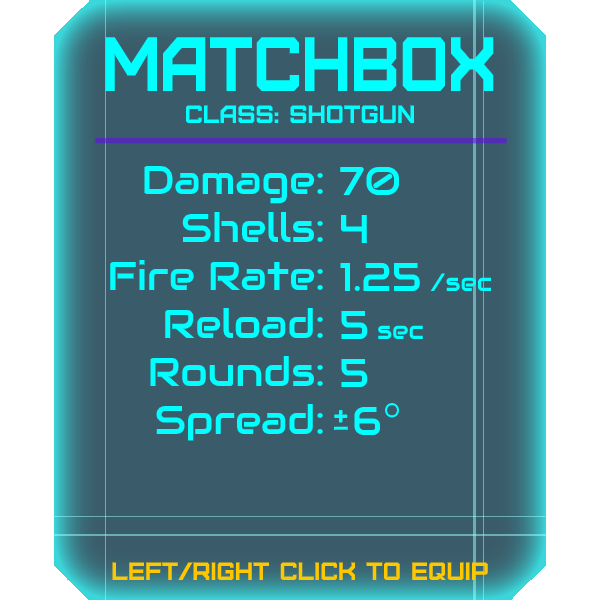
<style>
.page{position:relative;width:600px;height:600px;background:#3a5c6a}
.page>*{position:absolute;margin:0}
.t1{font:76.8px "Furore";color:#00ffff;scale:0.87 1}
.t2{font:25px "Furore";color:#00ffff}
.t3{font:40px "Audiowide-Regular";color:#00ffff}
.t4{font:25px "Audiowide-Regular";color:#00ffff}
.t5{font:25px "Furore";color:#ffc700}
</style>
<div class="page">
<p class="t1" style="left:105px;top:37px;width:389px;height:54px">matchbox</p>
<p class="t2" style="left:186px;top:105px;width:228px;height:18px">Class: Shotgun</p>
<p class="t3" style="left:110px;top:165px;width:213px;height:276px;text-align:right">Damage:<br>Shells:<br>Fire Rate:<br>Reload:<br>Rounds:<br>Spread:</p>
<p class="t3" style="left:340px;top:166px;width:152px;height:269px">70<br>4<br>1.25 <span class="t4">/sec<br></span>5 <span class="t4">sec<br></span>5<br> 6</p>
<p class="t5" style="left:112px;top:562px;width:376px;height:18px">left/right click to equip</p>
</div>
